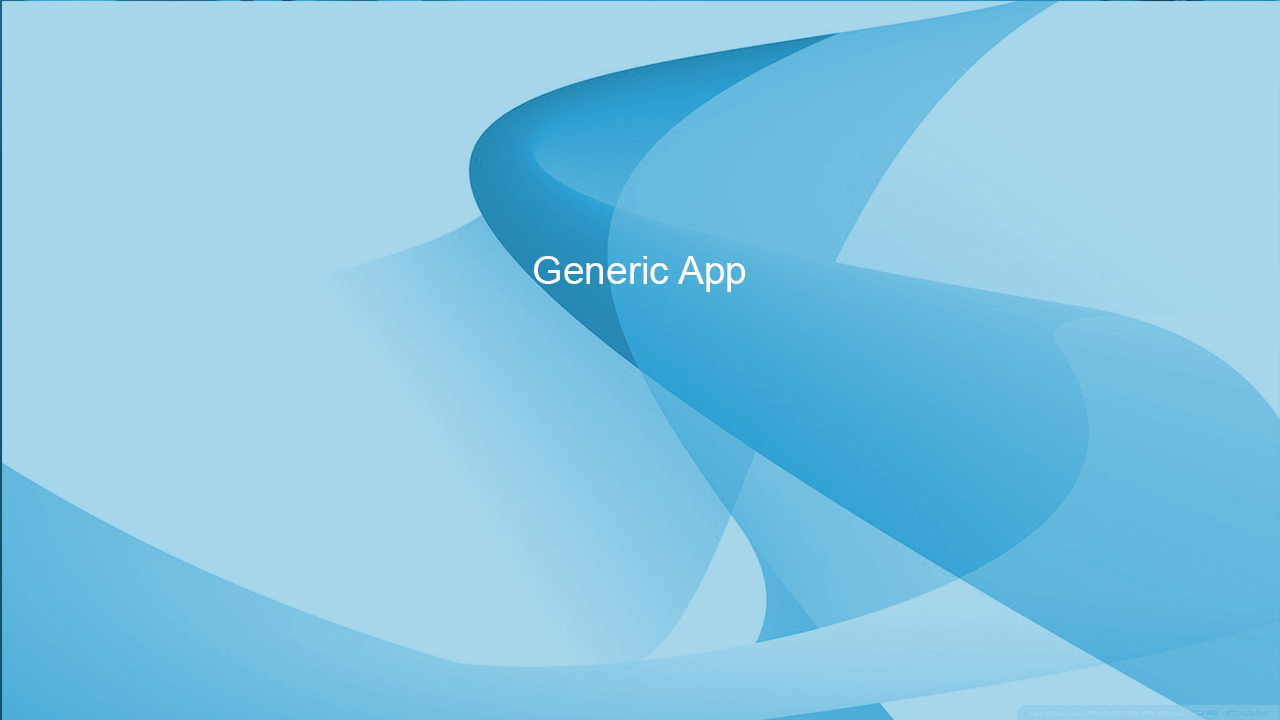
<style>
.page{position:relative;width:1280px;height:720px;background:#a8d7ec}
.page>*{position:absolute;margin:0}
.t1{font:39px "ArialMT";color:#ffffff}
</style>
<div class="page">
<p class="t1" style="left:534px;top:256px;width:212px;height:36px">Generic App</p>
</div>
